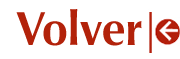
<style>
.page{position:relative;width:180px;height:59px;background:#ffffff}
.page>*{position:absolute;margin:0}
.t1{font:48px "ZapfHumanist601BT-Bold";color:#b2220a;scale:0.95 1}
</style>
<div class="page">
<p class="t1" style="left:16px;top:9px;width:126px;height:37px">Volver</p>
</div>
